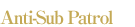
<style>
.page{position:relative;width:135px;height:27px;background:#ffffff}
.page>*{position:absolute;margin:0}
.t1{font:18px "RyuminPro-ExBold";letter-spacing:-0.08em;color:#c4a956}
</style>
<div class="page">
<p class="t1" style="left:0px;top:10px;width:113px;height:15px">Anti-Sub Patrol</p>
</div>
